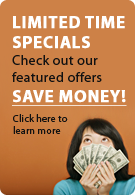
<style>
.page{position:relative;width:135px;height:195px;background:#cd8147}
.page>*{position:absolute;margin:0}
.t1{font:14px "Myriad-Roman";letter-spacing:0.025em;color:#111111}
.t2{font:17px "Myriad-Bold";letter-spacing:0.025em;color:#ffffff;font-weight:bold}
.t3{font:17px "Myriad-Bold";letter-spacing:0.025em;color:#ffffff;font-weight:bold;text-decoration:underline}
.t4{font:10px "Myriad-Roman";letter-spacing:0.025em;color:#111111}
</style>
<div class="page">
<p class="t1" style="left:12px;top:16px;width:115px;height:90px"><span class="t2">LIMITED TIME<br>SPECIALS<br></span>Check out our<br>featured offers<br><span class="t3">SAVE MONEY!</span></p>
<p class="t4" style="left:13px;top:114px;width:55px;height:20px">Click here to<br>learn more</p>
</div>
